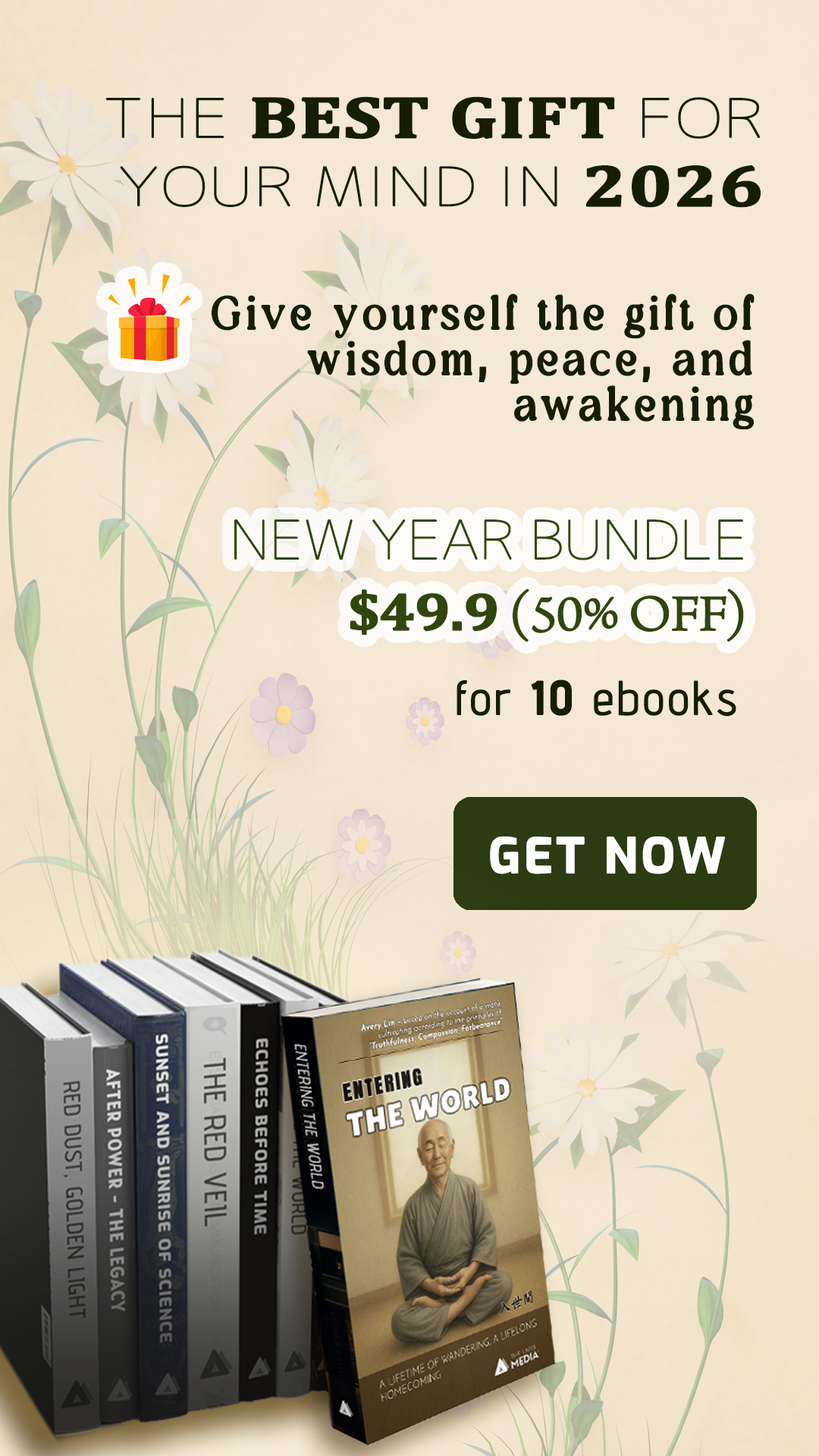
<style>
.page{position:relative;width:819px;height:1456px}
.page>*{position:absolute;margin:0}
.t1{font:53.4px/68.4px "Chogokuboso-Gothic";color:#151e05;font-weight:bold;scale:1.25 1}
.t2{font:58.7px/68.4px "Cambria-Bold";color:#151e05;font-weight:bold;scale:1.25 1}
.t3{font:45.5px/45.5px "AmadiBlurDemo-Regular";letter-spacing:0.075em;color:#151e05;font-weight:bold}
.t4{font:45.5px/45.5px "Alatsi-Regular";letter-spacing:0.075em;color:#151e05;font-weight:bold}
.t5{font:53.2px/71px "Chogokuboso-Gothic";letter-spacing:-0.025em;color:#31460c;font-weight:bold;scale:1.11 1}
.t6{font:53.2px/71px "Cambria-Bold";letter-spacing:-0.025em;color:#31460c;font-weight:bold;scale:1.11 1}
.t7{font:53.2px/71px "ArnoPro-LightDisplay";letter-spacing:-0.025em;color:#31460c;font-weight:bold;scale:1.11 1}
.t8{font:47.3px "AdventPro-Regular";letter-spacing:0.05em;color:#151e05;font-weight:bold}
.t9{font:47.3px "AdventPro-Bold";letter-spacing:0.05em;color:#151e05;font-weight:bold}
.t10{font:47.8px "Exo-Bold";letter-spacing:0.05em;color:#ffffff;font-weight:bold}
</style>
<div class="page">
<p class="t1" style="left:105px;top:96px;width:656px;height:112px;text-align:right">THE <span class="t2">BEST GIFT</span> FOR YOUR MIND IN <span class="t2">2026</span></p>
<p class="t3" style="left:212px;top:293px;width:543px;height:137px;text-align:right">Give yourself the gift of<br> wisdom<span class="t4">,</span> peace<span class="t4">,</span> and awakening</p>
<p class="t5" style="left:234px;top:519px;width:510px;height:123px;text-align:right">NEW YEAR BUNDLE <span class="t6">$49.9</span><span class="t7"> (50% OFF)</span></p>
<p class="t8" style="left:457px;top:679px;width:279px;height:38px">for <span class="t9">10</span> ebooks</p>
<p class="t10" style="left:490px;top:836px;width:235px;height:38px">GET NOW</p>
</div>
